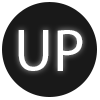
<style>
.page{position:relative;width:100px;height:100px;background:#191919}
.page>*{position:absolute;margin:0}
.t1{font:60px "MyriadPro-Regular";color:#ffffff}
</style>
<div class="page">
<p class="t1" style="left:18px;top:30px;width:65px;height:41px">UP</p>
</div>
